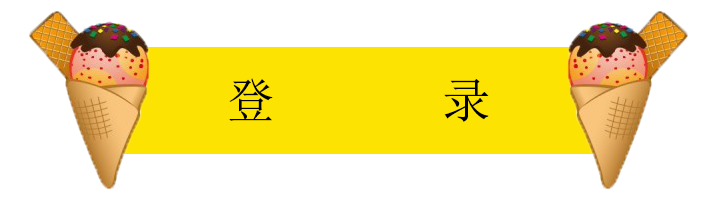
<style>
.page{position:relative;width:720px;height:200px;background:#ffffff}
.page>*{position:absolute;margin:0}
.t1{font:48px "NSimSun";color:#000000}
</style>
<div class="page">
<p class="t1" style="left:229px;top:78px;width:260px;height:44px">登       录</p>
</div>
